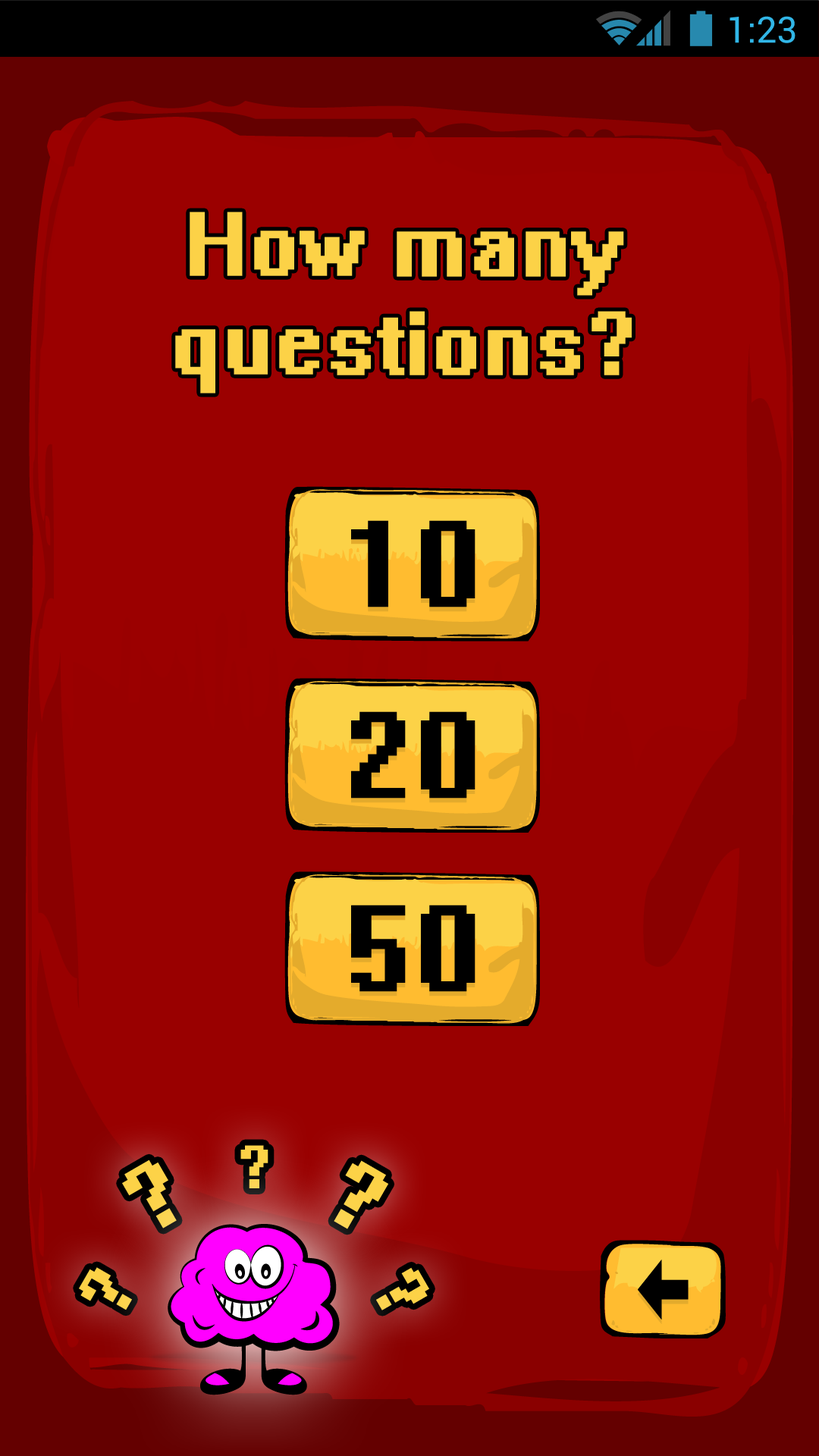
<style>
.page{position:relative;width:819px;height:1456px;background:#9b0000}
.page>*{position:absolute;margin:0}
.t1{font:36.4px "Roboto-Regular";color:#31b6e7}
.t2{font:80px/98.6px "System";letter-spacing:0.02em;color:#fcd247;font-weight:bold}
.t3{font:107.9px "System";letter-spacing:0.02em;color:#000000;font-weight:bold}
.t4{font:54px "System";letter-spacing:0.02em;color:#fcd248;font-weight:bold}
.t5{font:82.9px "System";letter-spacing:0.02em;color:#fcd248;font-weight:bold}
.t6{font:82.9px "System";letter-spacing:0.02em;color:#fcd247;font-weight:bold}
.t7{font:64.7px "System";letter-spacing:0.02em;color:#fcd247;font-weight:bold}
</style>
<div class="page">
<p class="t1" style="left:730px;top:16px;width:65px;height:27px">1:23</p>
<p class="t2" style="left:175px;top:212px;width:457px;height:182px;text-align:center">How many<br>questions?</p>
<p class="t3" style="left:351px;top:520px;width:124px;height:87px">10</p>
<p class="t3" style="left:351px;top:711px;width:124px;height:88px">20</p>
<p class="t3" style="left:351px;top:905px;width:124px;height:87px">50</p>
<p class="t4" style="left:240px;top:1145px;width:28px;height:43px">?</p>
<p class="t5" style="left:122px;top:1159px;width:55px;height:69px;rotate:-30deg">?</p>
<p class="t6" style="left:334px;top:1160px;width:55px;height:69px;rotate:30deg">?</p>
<p class="t7" style="left:79px;top:1267px;width:53px;height:43px;rotate:-60deg">?</p>
<p class="t7" style="left:376px;top:1267px;width:53px;height:43px;rotate:60deg">?</p>
</div>
